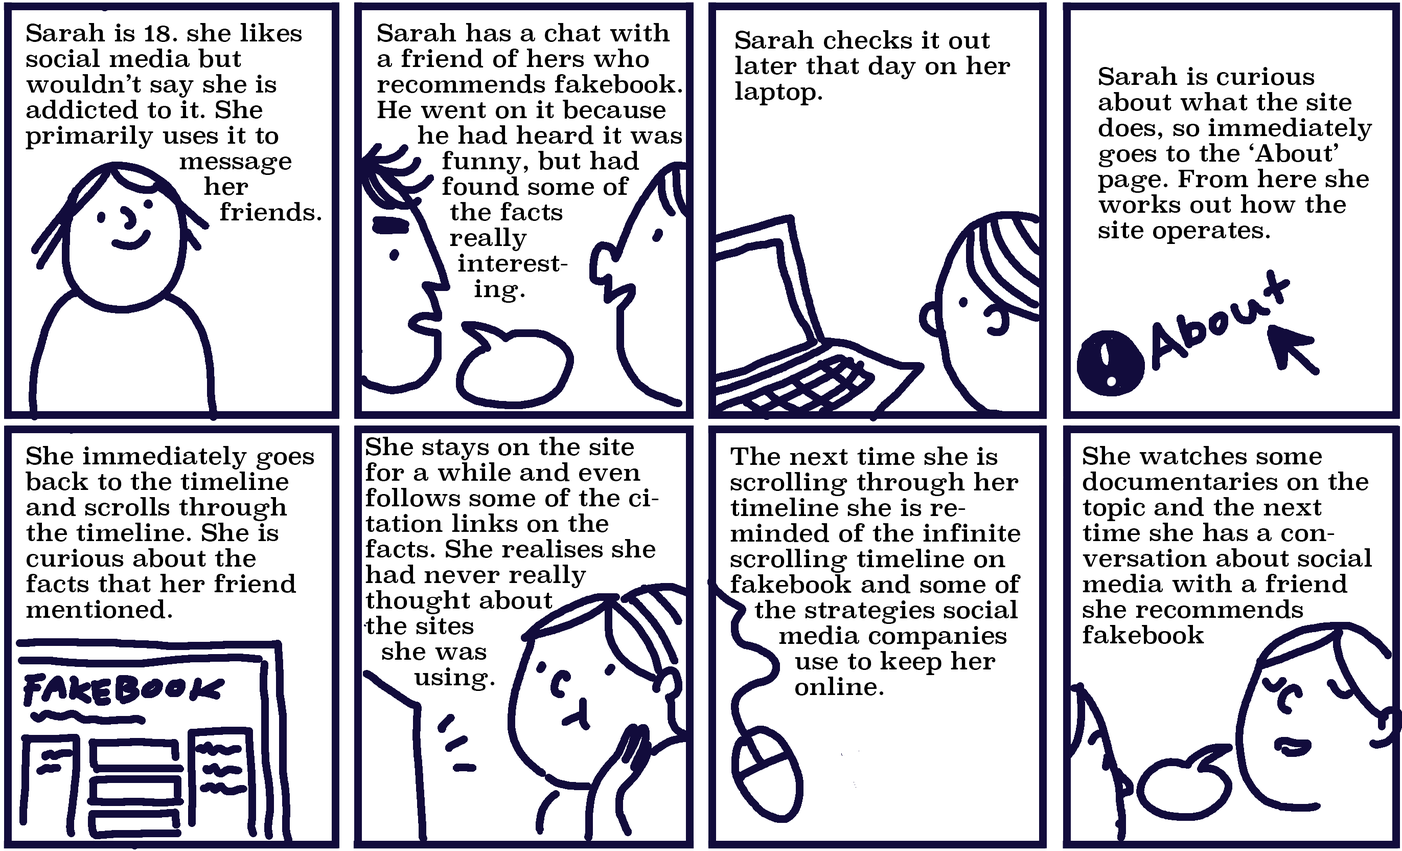
<style>
.page{position:relative;width:1402px;height:851px;background:#ffffff}
.page>*{position:absolute;margin:0}
.t1{font:23.4px/25.6px "Superclarendon-Regular";color:#000000}
.t2{font:23.4px/92px "Superclarendon-Regular";color:#000000}
</style>
<div class="page">
<p class="t1" style="left:26px;top:23px;width:295px;height:198px"><span class="t2">Sarah is 18. she likes</span><br>social media but <br>wouldn’t say she is<br>addicted to it. She <br>primarily uses it to <br>                   message<br>                      her<br>                        friends.</p>
<p class="t1" style="left:377px;top:23px;width:305px;height:280px">Sarah has a chat with<br>a friend of hers who<br>recommends fakebook.<br>He went on it because    <br>     he had heard it was<br>        funny, but had<br>        found some of<br>         the facts <br>         really <br>          interest-<br>            ing.</p>
<p class="t1" style="left:735px;top:30px;width:275px;height:75px">Sarah checks it out<br>later that day on her<br>laptop.</p>
<p class="t1" style="left:1098px;top:66px;width:274px;height:178px">Sarah is curious about what the site does, so immediately goes to the ‘About’<br>page. From here she works out how the site operates.</p>
<p class="t1" style="left:365px;top:437px;width:294px;height:254px">She stays on the site for a while and even follows some of the citation links on the facts. She realises she had never really <br>thought about <br>the sites <br>  she was <br>      using.</p>
<p class="t1" style="left:26px;top:446px;width:288px;height:172px">She immediately goes back to the timeline and scrolls through the timeline. She is curious about the facts that her friend mentioned.</p>
<p class="t1" style="left:730px;top:446px;width:291px;height:249px">The next time she is scrolling through her timeline she is reminded of the infinite scrolling timeline on fakebook and some of    <br>   the strategies social      <br>      media companies<br>        use to keep her <br>        online.</p>
<p class="t1" style="left:1083px;top:446px;width:289px;height:198px">She watches some documentaries on the topic and the next time she has a conversation about social media with a friend she recommends<br>fakebook</p>
</div>
